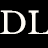
<style>
.page{position:relative;width:48px;height:48px;background:#000000}
.page>*{position:absolute;margin:0}
.t1{font:30.9px "LibreBaskerville-Regular";color:#fffcf6;scale:1.05 1}
</style>
<div class="page">
<p class="t1" style="left:0px;top:10px;width:50px;height:24px">DL</p>
</div>
